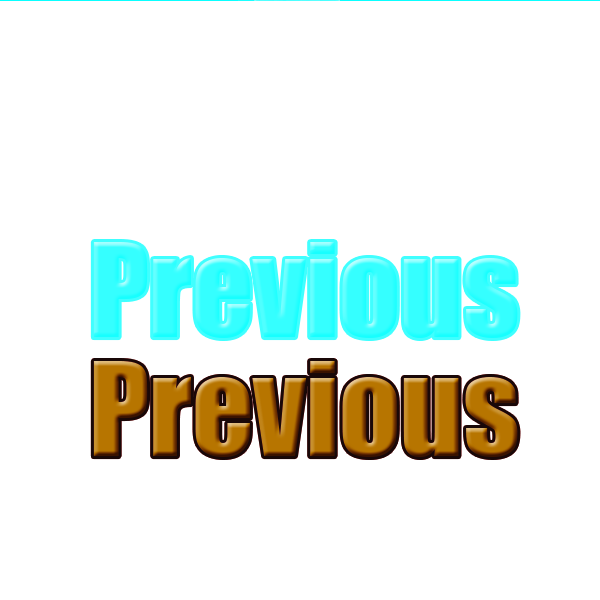
<style>
.page{position:relative;width:600px;height:600px;background:#ffffff}
.page>*{position:absolute;margin:0}
.t1{font:120px "Impact";color:#35ffff}
</style>
<div class="page">
<p class="t1" style="left:93px;top:241px;width:425px;height:96px">Previous</p>
</div>
